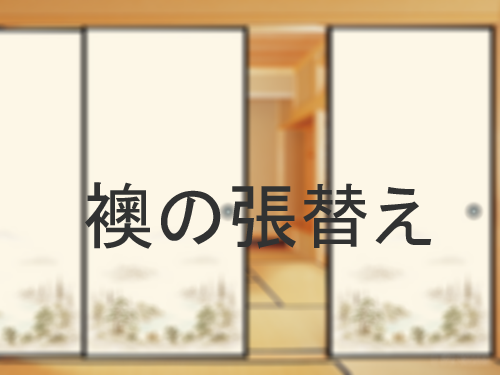
<style>
.page{position:relative;width:500px;height:375px;background:#fdf7e7}
.page>*{position:absolute;margin:0}
.t1{font:72px "MS-PGothic";color:#313232}
</style>
<div class="page">
<p class="t1" style="left:85px;top:182px;width:347px;height:67px">襖の張替え</p>
</div>
